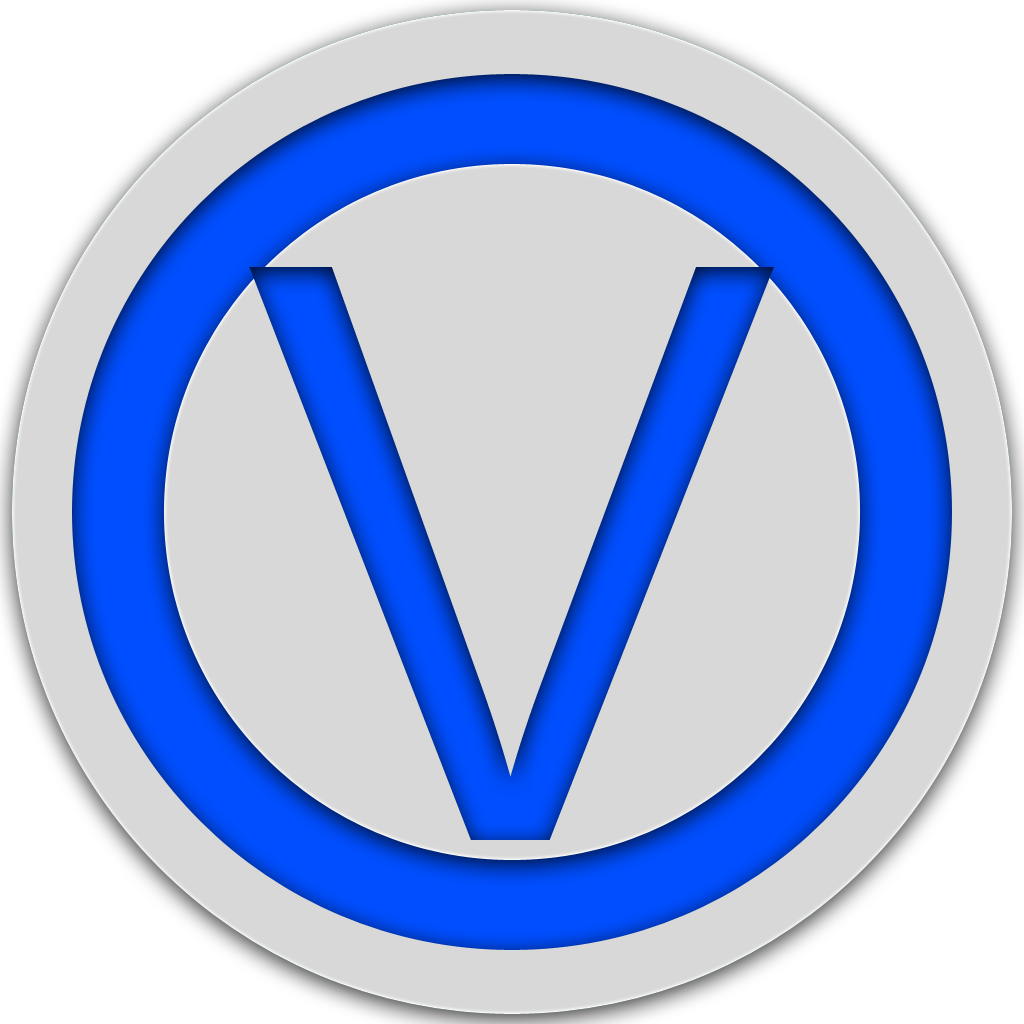
<style>
.page{position:relative;width:1024px;height:1024px;background:#d8d8d8}
.page>*{position:absolute;margin:0}
.t1{font:800px "ArialMT"}
</style>
<div class="page">
<p class="t1" style="left:249px;top:267px;width:525px;height:573px">V</p>
</div>
